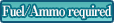
<style>
.page{position:relative;width:114px;height:23px}
.page>*{position:absolute;margin:0}
.t1{font:14px "RyuminPro-ExBold";letter-spacing:-0.08em;color:#ffffff;scale:0.9 1}
</style>
<div class="page">
<p class="t1" style="left:2px;top:5px;width:110px;height:14px">Fuel/Ammo required</p>
</div>
